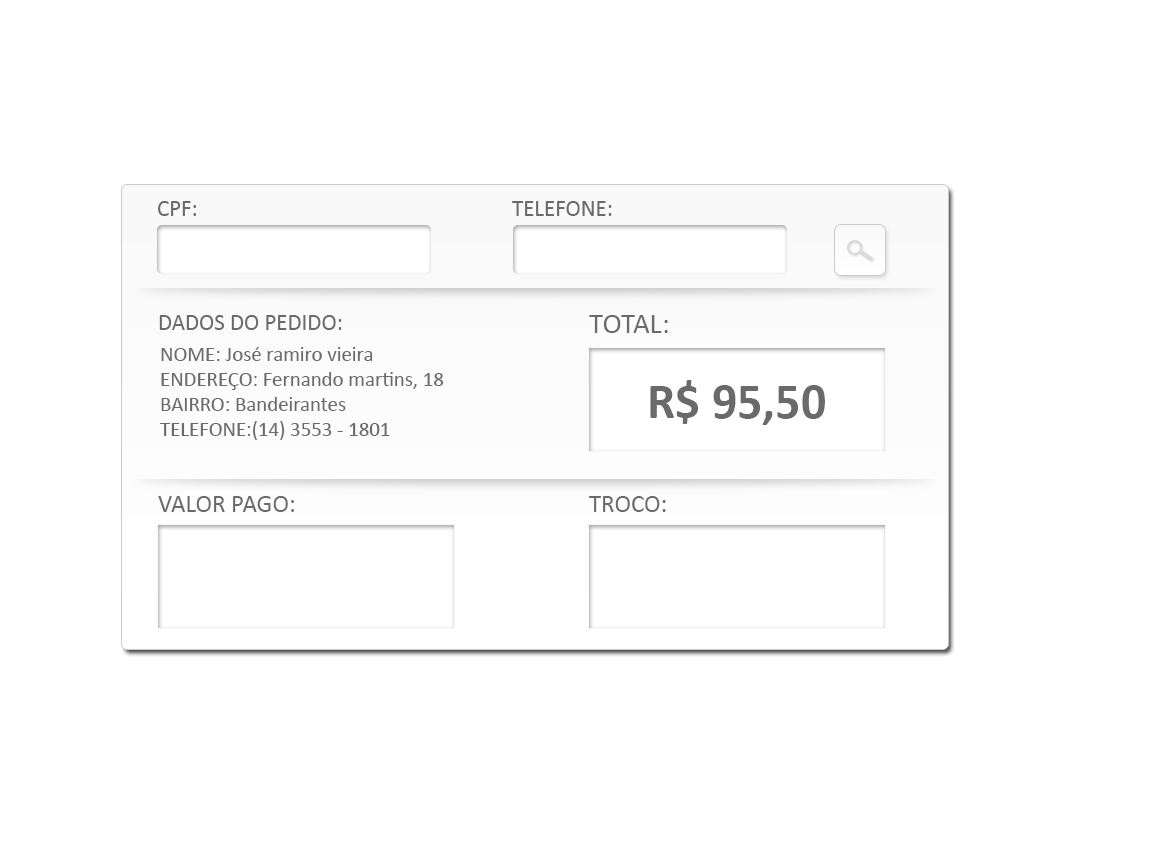
<style>
.page{position:relative;width:1152px;height:864px;background:#ffffff}
.page>*{position:absolute;margin:0}
.t1{font:22.9px "Calibri";color:#6a6a6a}
.t2{font:29.2px "Calibri";color:#6a6a6a}
.t3{font:20.8px "Calibri";color:#6a6a6a}
.t4{font:50px "Calibri-Bold";color:#6a6a6a}
.t5{font:25px "Calibri";color:#6a6a6a}
.t6{font:12px "Calibri";color:#6a6a6a}
</style>
<div class="page">
<p class="t1" style="left:158px;top:201px;width:38px;height:15px">CPF:</p>
<p class="t1" style="left:512px;top:201px;width:100px;height:15px">TELEFONE:</p>
<p class="t1" style="left:159px;top:315px;width:183px;height:15px">DADOS DO PEDIDO:</p>
<p class="t2" style="left:589px;top:315px;width:79px;height:18px">TOTAL:</p>
<p class="t3" style="left:160px;top:347px;width:284px;height:93px">NOME: José ramiro vieira<br>ENDEREÇO: Fernando martins, 18 <br>BAIRRO: Bandeirantes<br>TELEFONE:(14) 3553 - 1801</p>
<p class="t4" style="left:650px;top:380px;width:175px;height:45px">R$ 95,50</p>
<p class="t5" style="left:158px;top:496px;width:136px;height:16px">VALOR PAGO:</p>
<p class="t6" style="left:589px;top:496px;width:77px;height:16px">TROCO:</p>
</div>
